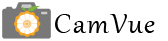
<style>
.page{position:relative;width:168px;height:41px;background:#ffffff}
.page>*{position:absolute;margin:0}
.t1{font:34.7px "Gabriola";letter-spacing:0.06em;color:#000000}
</style>
<div class="page">
<p class="t1" style="left:55px;top:14px;width:100px;height:19px">CamVue</p>
</div>
